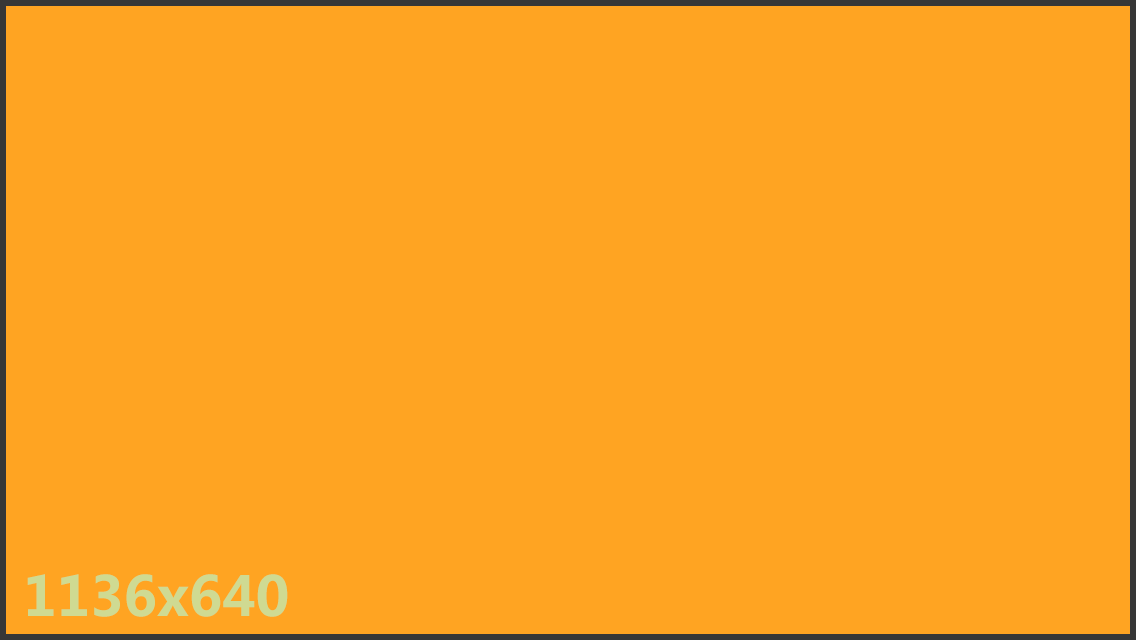
<style>
.page{position:relative;width:1136px;height:640px;background:#ffa422}
.page>*{position:absolute;margin:0}
.t1{font:54.3px "MicrosoftYaHei-Bold";color:#cfda92}
</style>
<div class="page">
<p class="t1" style="left:27px;top:574px;width:261px;height:43px">1136x640</p>
</div>
